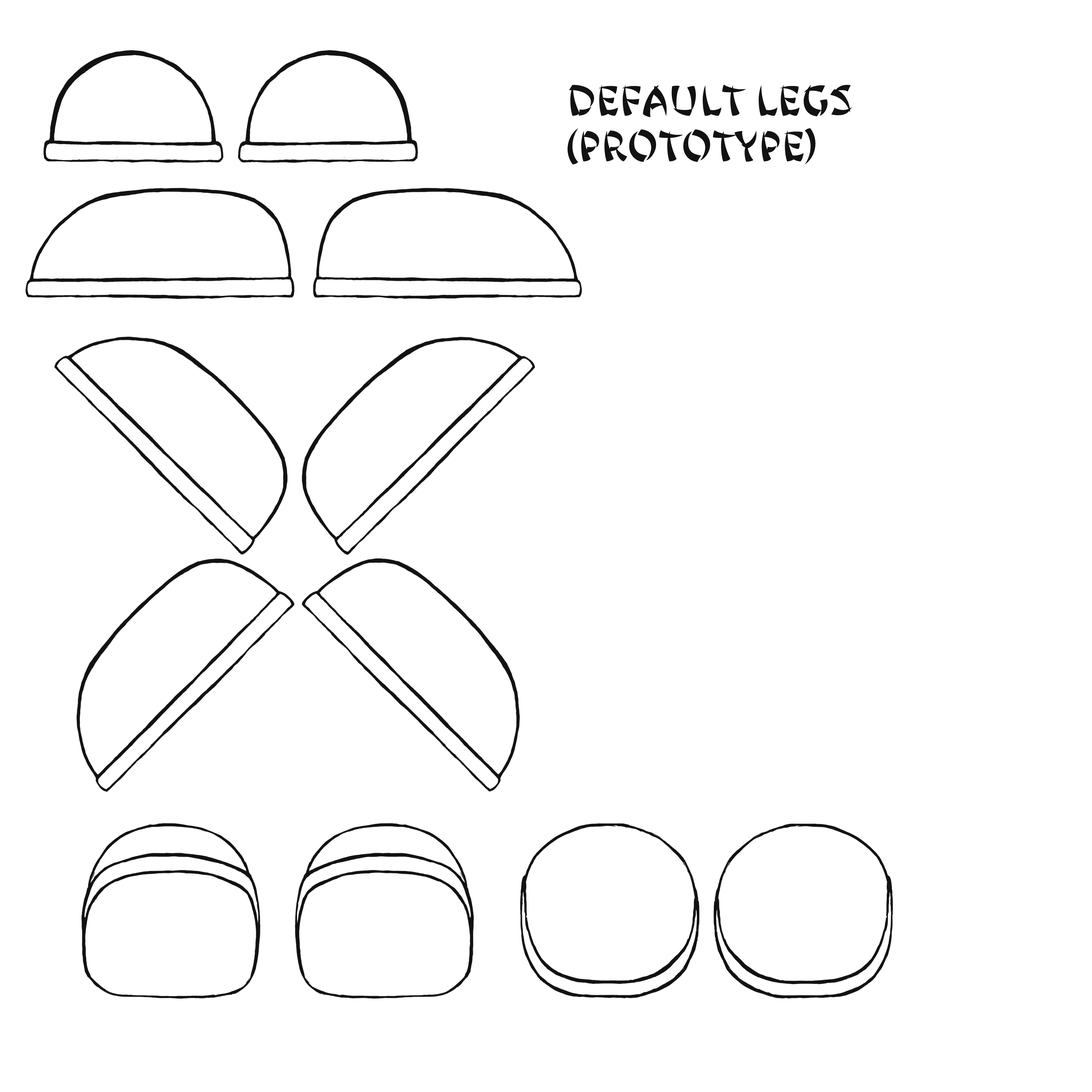
<style>
.page{position:relative;width:1092px;height:1092px;background:#ffffff}
.page>*{position:absolute;margin:0}
.t1{font:37.9px "JingJing";color:#121212}
</style>
<div class="page">
<p class="t1" style="left:568px;top:85px;width:284px;height:79px">default legs (prototype)</p>
</div>
